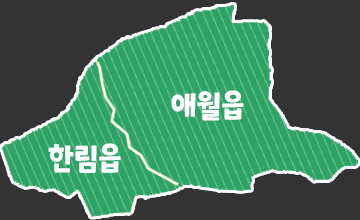
<style>
.page{position:relative;width:360px;height:220px;background:#333333}
.page>*{position:absolute;margin:0}
.t1{font:30.5px "ONEMobilePOPRegular";color:#ffffff;scale:0.93 1}
</style>
<div class="page">
<p class="t1" style="left:171px;top:90px;width:73px;height:31px">애월읍</p>
<p class="t1" style="left:48px;top:143px;width:73px;height:30px">한림읍</p>
</div>
